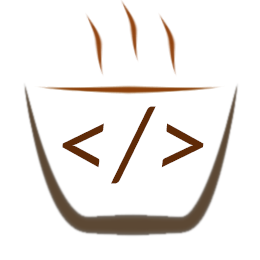
<style>
.page{position:relative;width:260px;height:260px;background:#ffffff}
.page>*{position:absolute;margin:0}
.t1{font:100px "Lato-Italic";color:#5f2a07}
</style>
<div class="page">
<p class="t1" style="left:62px;top:106px;width:142px;height:78px">&lt;/&gt;</p>
</div>
